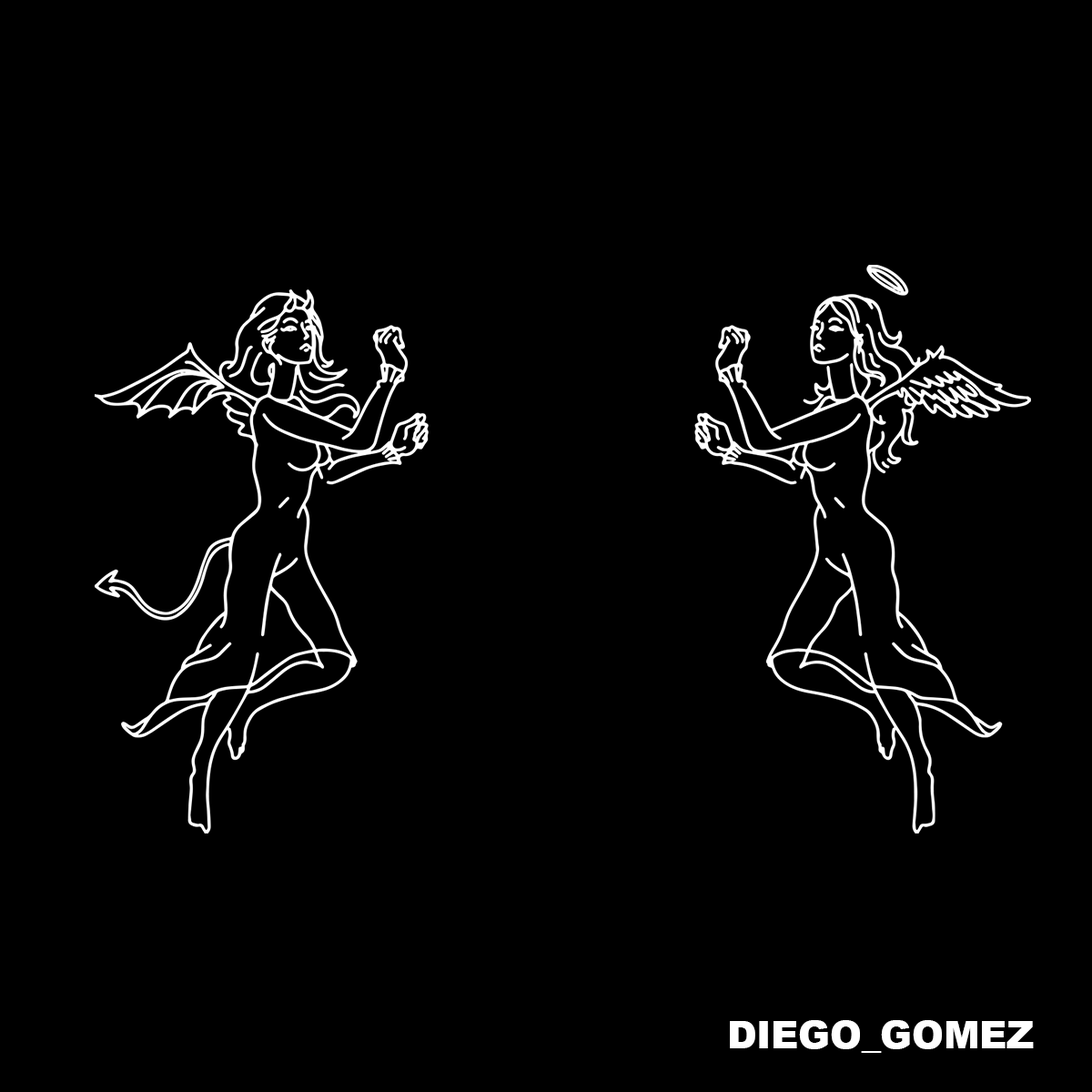
<style>
.page{position:relative;width:1092px;height:1092px;background:#000000}
.page>*{position:absolute;margin:0}
.t1{font:37.9px "Arial-Black";color:#ffffff}
</style>
<div class="page">
<p class="t1" style="left:730px;top:1020px;width:304px;height:33px">DIEGO_GOMEZ</p>
</div>
